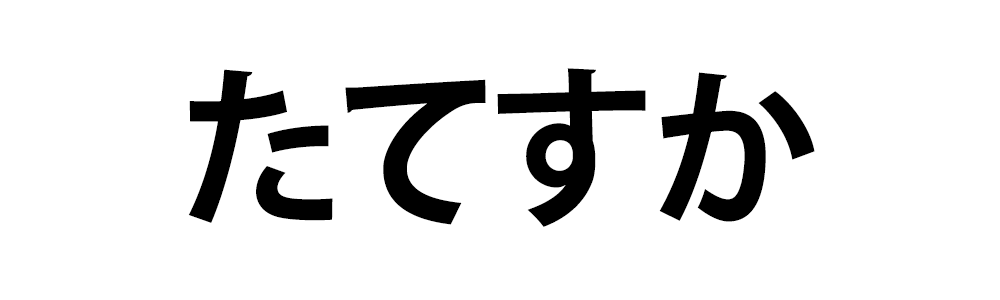
<style>
.page{position:relative;width:1000px;height:300px;background:#ffffff}
.page>*{position:absolute;margin:0}
.t1{font:170px "KozGoPr6N-Bold";letter-spacing:-0.01em;color:#000000}
</style>
<div class="page">
<p class="t1" style="left:188px;top:68px;width:627px;height:159px">たてすか</p>
</div>
